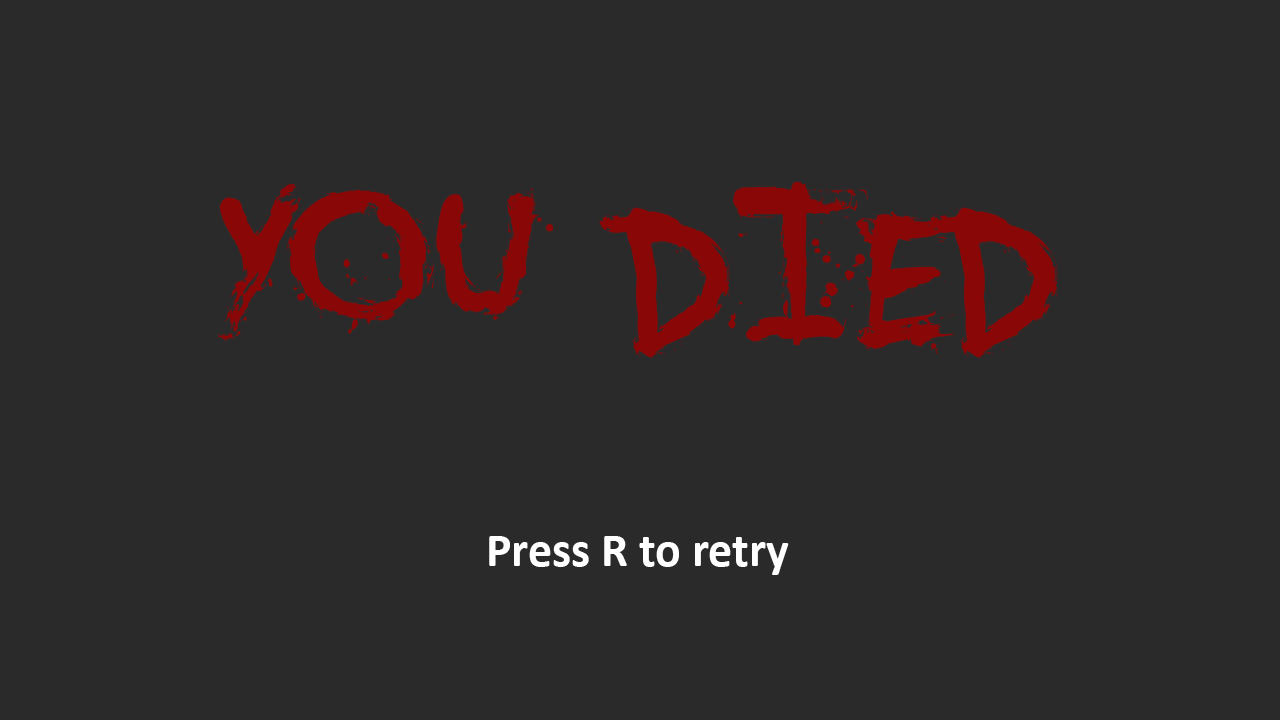
<style>
.page{position:relative;width:1280px;height:720px;background:#2a2a2a}
.page>*{position:absolute;margin:0}
.t1{font:300px "YouMurdererBB";color:#8a0707}
.t2{font:48px "Calibri-Bold";color:#ffffff}
</style>
<div class="page">
<p class="t1" style="left:218px;top:181px;width:843px;height:177px">YOU DIED</p>
<p class="t2" style="left:489px;top:536px;width:300px;height:39px">Press R to retry</p>
</div>
